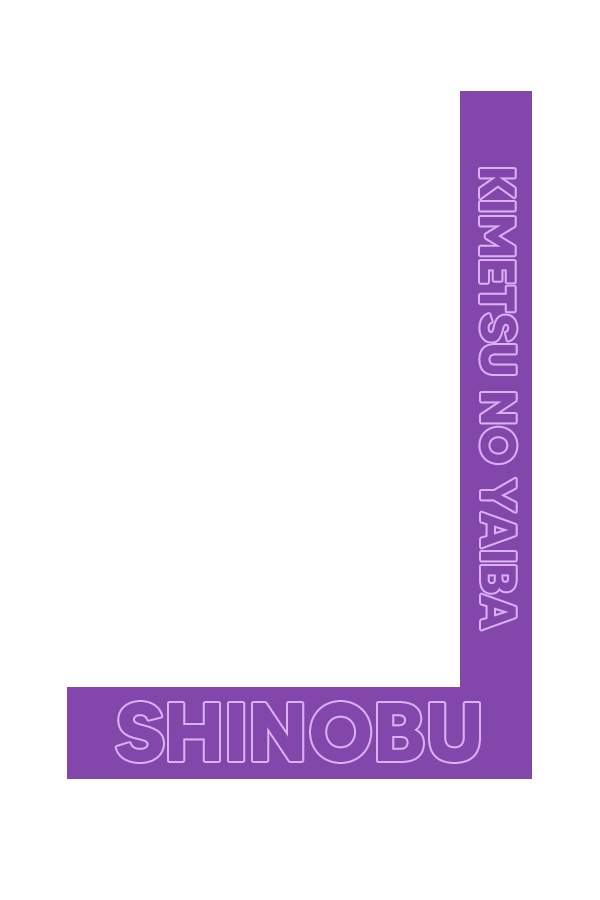
<style>
.page{position:relative;width:600px;height:900px;background:#ffffff}
.page>*{position:absolute;margin:0}
.t1{font:49.7px "MADETOMMY-Bold";color:#8347ab}
.t2{font:83.3px "MADETOMMY-Bold";color:#8347ab}
</style>
<div class="page">
<p class="t1" style="left:480px;top:169px;width:37px;height:461px;rotate:90deg">KIMETSU NO YAIBA</p>
<p class="t2" style="left:116px;top:702px;width:363px;height:60px">SHINOBU</p>
</div>
